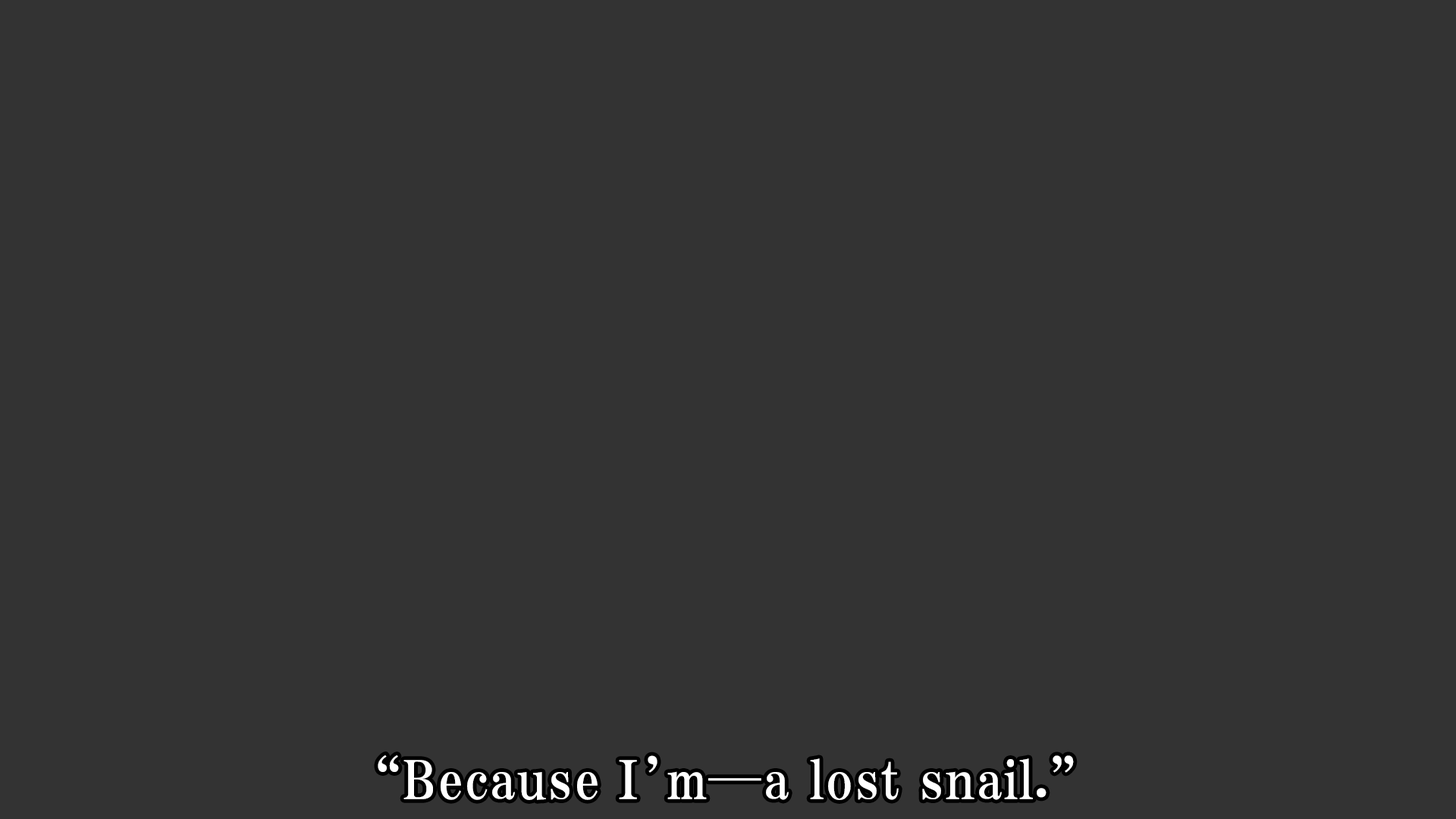
<style>
.page{position:relative;width:1456px;height:819px;background:#333333}
.page>*{position:absolute;margin:0}
.t1{font:53.1px "HGPMinchoE";letter-spacing:0.025em;color:#ffffff}
</style>
<div class="page">
<p class="t1" style="left:378px;top:755px;width:696px;height:45px">“Because I’m─a lost snail.”</p>
</div>
